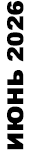
<style>
.page{position:relative;width:30px;height:150px;background:#ffffff}
.page>*{position:absolute;margin:0}
.t1{font:22px "Arial-Black";color:#000000;font-weight:bold}
</style>
<div class="page">
<p class="t1" style="left:7px;top:1px;width:17px;height:149px;rotate:-90deg">ИЮНЬ 2026</p>
</div>
